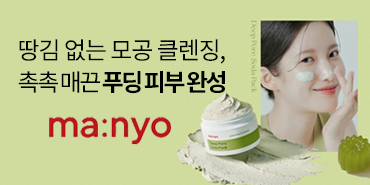
<style>
.page{position:relative;width:370px;height:185px;background:#d0dc9e}
.page>*{position:absolute;margin:0}
.t1{font:23.8px "NotoSansKR-Regular";letter-spacing:-0.04em;color:#000000}
.t2{font:23.8px "NotoSansKR-Bold";letter-spacing:-0.1em;color:#000000}
.t3{font:23.8px "NotoSansKR-Regular";letter-spacing:-0.1em;color:#000000}
</style>
<div class="page">
<p class="t1" style="left:19px;top:39px;width:206px;height:25px">땅김 없는 모공 클렌징,</p>
<p class="t2" style="left:18px;top:71px;width:207px;height:23px"><span class="t3">촉촉 매끈 </span>푸딩 피부 완성</p>
</div>
